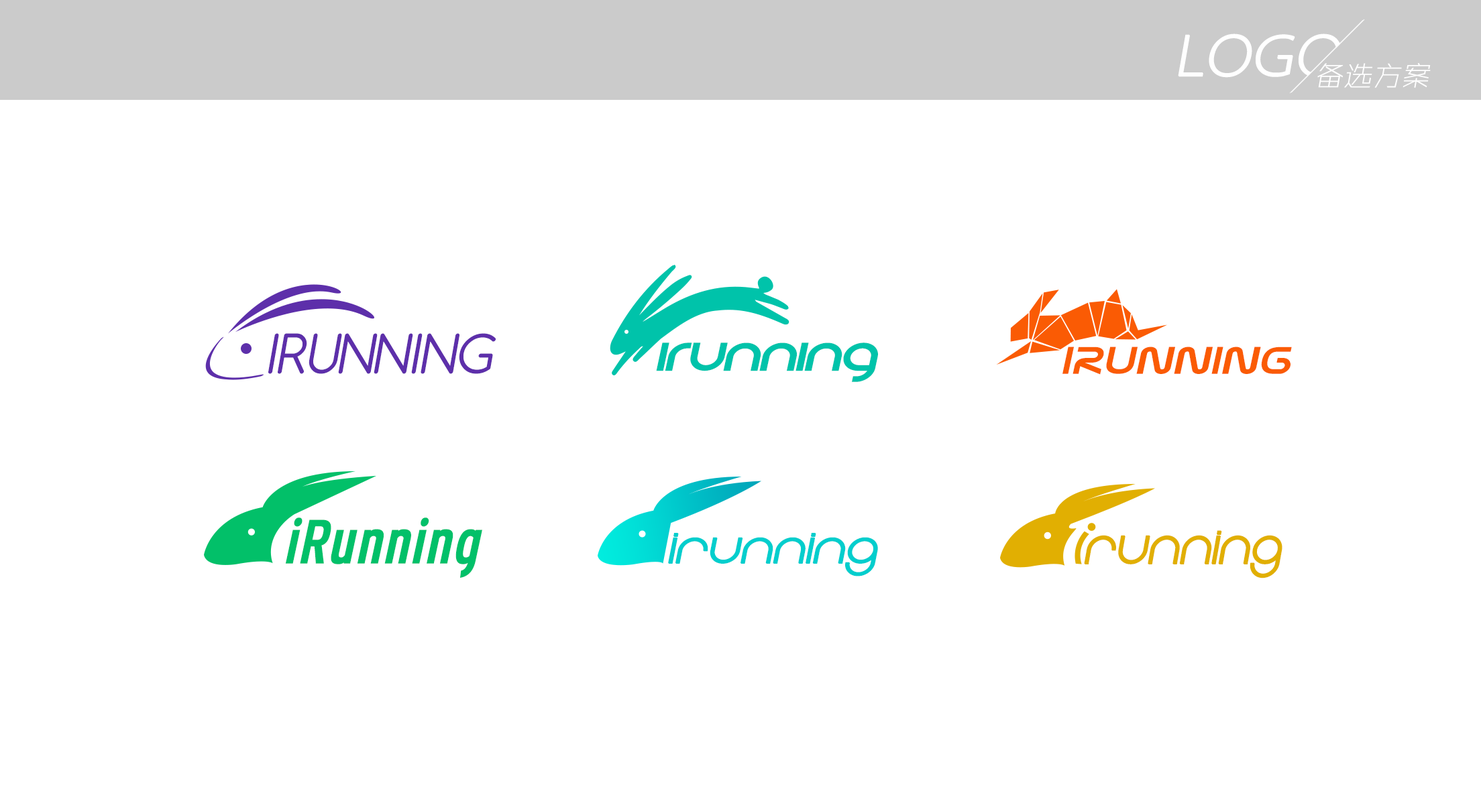
<style>
.page{position:relative;width:1481px;height:805px;background:#ffffff}
.page>*{position:absolute;margin:0}
.t1{font:59.4px "ZHSRXT--GBK1-0";color:#ffffff;font-weight:bold;font-style:italic}
.t2{font:28.8px "ZHSRXT--GBK1-0";color:#ffffff;font-style:italic}
.t3{font:51.5px "Comfortaa";letter-spacing:-0.015em;color:#5d2faa;text-transform:uppercase;font-style:italic}
.t4{font:62.1px "REZ";color:#00c3aa;font-style:italic;scale:1.21 1}
.t5{font:39.1px "NasalizationRg-Regular";color:#fa5b04;font-style:italic;scale:1.21 1}
.t6{font:60.9px "BlueHighwayCondensed-Regular";color:#02c069;font-style:italic;scale:1.22 1}
.t7{font:49.8px "EightOne";letter-spacing:-0.01em;color:#02cecd;font-weight:bold;font-style:italic;scale:1.13 1}
.t8{font:54.5px "EightOne";letter-spacing:-0.012em;color:#e1af02;font-weight:bold;font-style:italic}
</style>
<div class="page">
<p class="t1" style="left:1178px;top:34px;width:163px;height:44px">LOGO</p>
<p class="t2" style="left:1317px;top:63px;width:113px;height:25px">备选方案</p>
<p class="t3" style="left:268px;top:333px;width:228px;height:41px">iRunning</p>
<p class="t4" style="left:656px;top:343px;width:222px;height:39px">iRunning</p>
<p class="t5" style="left:1062px;top:347px;width:230px;height:28px">iRunning</p>
<p class="t6" style="left:285px;top:518px;width:197px;height:60px">iRunning</p>
<p class="t7" style="left:668px;top:533px;width:210px;height:44px">iRunning</p>
<p class="t8" style="left:1084px;top:530px;width:198px;height:49px">Running</p>
</div>
